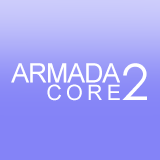
<style>
.page{position:relative;width:160px;height:160px;background:#8483f7}
.page>*{position:absolute;margin:0}
.t1{font:26.6px "ArialMT";letter-spacing:-0.04em;color:#ffffff}
.t2{font:50px "CenturyGothic";letter-spacing:-0.04em;color:#ffffff}
.t3{font:21.3px "ArialMT";letter-spacing:-0.04em;color:#ffffff}
</style>
<div class="page">
<p class="t1" style="left:11px;top:63px;width:109px;height:20px">ARMADA</p>
<p class="t2" style="left:122px;top:63px;width:25px;height:37px">2</p>
<p class="t3" style="left:47px;top:84px;width:73px;height:17px">C O R E</p>
</div>
